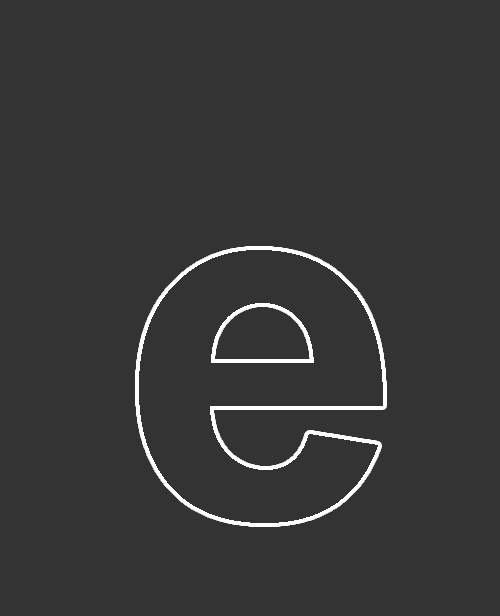
<style>
.page{position:relative;width:500px;height:616px;background:#333333}
.page>*{position:absolute;margin:0}
.t1{font:500px "Arial-BoldMT";color:#333333}
</style>
<div class="page">
<p class="t1" style="left:139px;top:250px;width:244px;height:273px">е</p>
</div>
